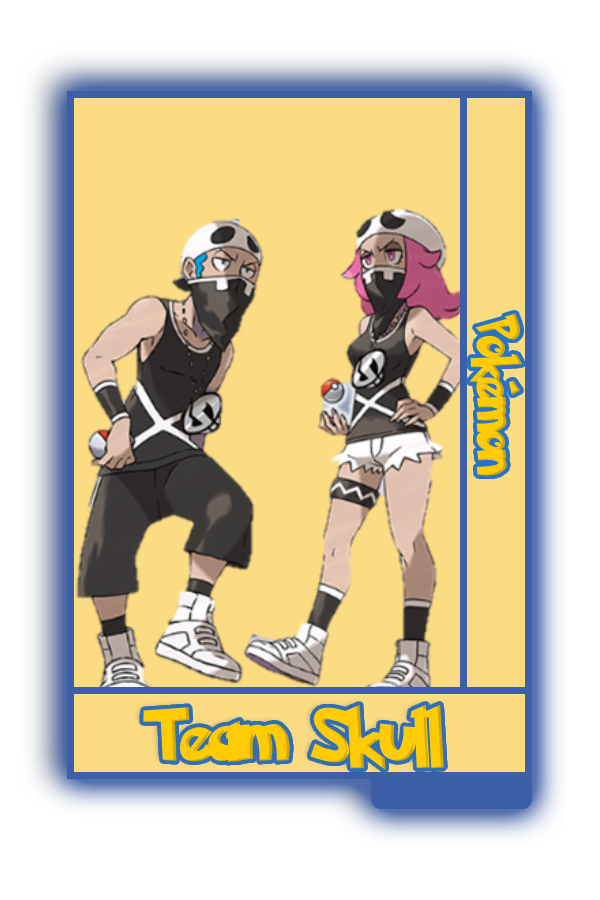
<style>
.page{position:relative;width:600px;height:900px;background:#fbdc83}
.page>*{position:absolute;margin:0}
.t1{font:48.8px "PokemonSolidNormal";color:#ffcb05;scale:0.8 1}
.t2{font:60.1px "PokemonSolidNormal";color:#ffcb05;scale:0.96 1}
</style>
<div class="page">
<p class="t1" style="left:469px;top:313px;width:54px;height:163px;rotate:90deg">Pokémon</p>
<p class="t2" style="left:143px;top:704px;width:301px;height:67px">Team Skull</p>
</div>
